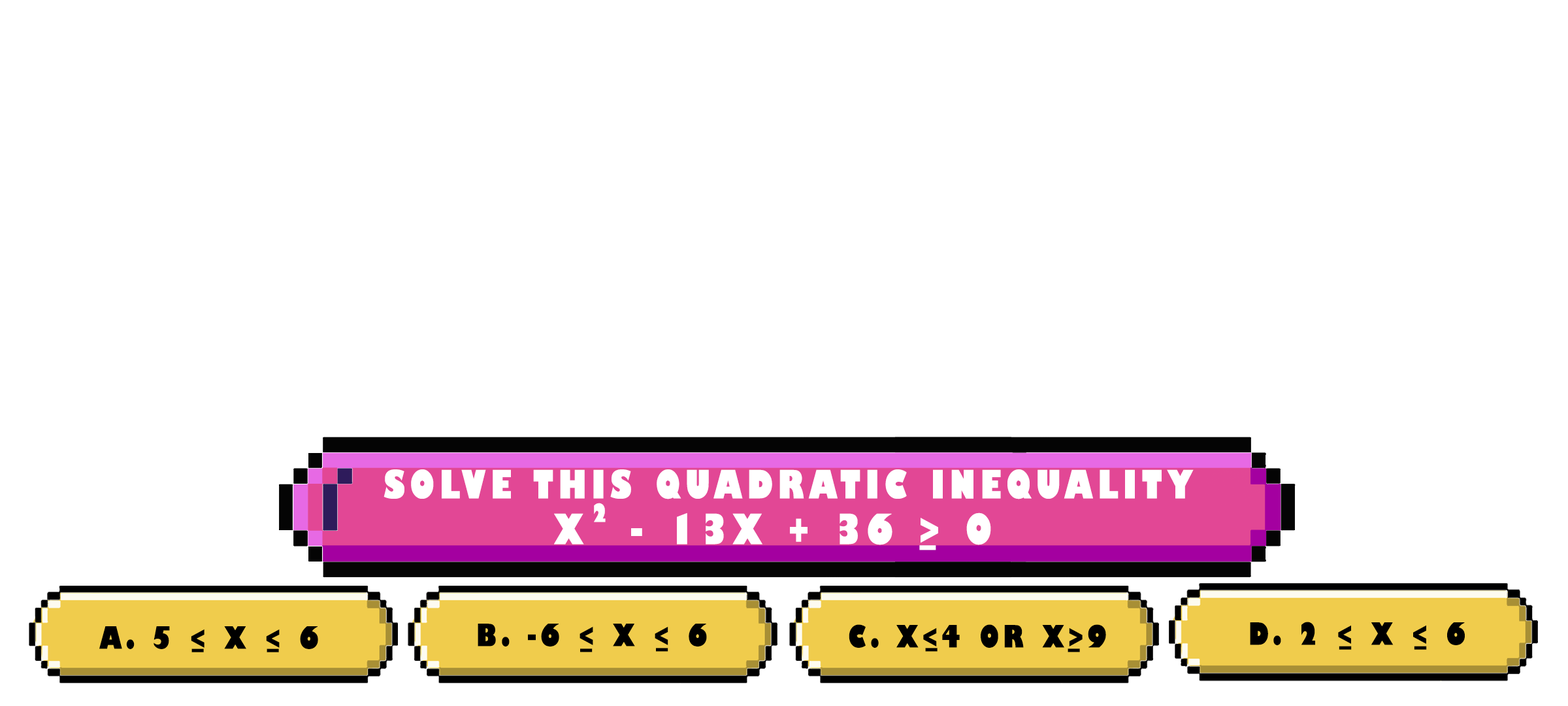
<style>
.page{position:relative;width:1568px;height:706px;background:#ffffff}
.page>*{position:absolute;margin:0}
.t1{font:38.1px "GillSans-UltraBoldCondensed";letter-spacing:0.115em;color:#ffffff;text-transform:uppercase;scale:1.12 1}
.t2{font:24.5px "GillSans-UltraBoldCondensed";letter-spacing:0.115em;color:#ffffff;text-transform:uppercase;scale:1.12 1}
.t3{font:40.8px "GillSans-UltraBoldCondensed";letter-spacing:0.115em;color:#ffffff;text-transform:uppercase;scale:1.12 1}
.t4{font:29.9px "GillSans-UltraBoldCondensed";letter-spacing:0.115em;color:#000000;text-transform:uppercase;scale:1.12 1}
</style>
<div class="page">
<p class="t1" style="left:384px;top:469px;width:810px;height:30px">solve this quadratic inequality</p>
<p class="t2" style="left:594px;top:502px;width:12px;height:20px">2</p>
<p class="t3" style="left:554px;top:512px;width:437px;height:33px">x  - 13x + 36 &gt; 0</p>
<p class="t3" style="left:919px;top:545px;width:17px;height:5px">_</p>
<p class="t4" style="left:99px;top:626px;width:219px;height:23px">a. 5 &lt; x &lt; 6</p>
<p class="t4" style="left:478px;top:623px;width:229px;height:23px">b. -6 &lt; x &lt; 6</p>
<p class="t4" style="left:849px;top:624px;width:257px;height:23px">c. x&lt;4 or x&gt;9</p>
<p class="t4" style="left:1250px;top:621px;width:215px;height:24px">d. 2 &lt; x &lt; 6</p>
<p class="t4" style="left:191px;top:648px;width:13px;height:4px">_</p>
<p class="t4" style="left:267px;top:648px;width:12px;height:4px">_</p>
<p class="t4" style="left:580px;top:648px;width:13px;height:4px">_</p>
<p class="t4" style="left:656px;top:647px;width:12px;height:4px">_</p>
<p class="t4" style="left:925px;top:647px;width:13px;height:4px">_</p>
<p class="t4" style="left:1068px;top:648px;width:12px;height:4px">_</p>
<p class="t4" style="left:1339px;top:645px;width:13px;height:4px">_</p>
<p class="t4" style="left:1414px;top:645px;width:13px;height:4px">_</p>
</div>
